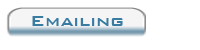
<style>
.page{position:relative;width:200px;height:50px;background:#ffffff}
.page>*{position:absolute;margin:0}
.t1{font:20px "BankGothicBT-Medium";color:#387ca2}
</style>
<div class="page">
<p class="t1" style="left:32px;top:16px;width:91px;height:10px">Emailing</p>
</div>
